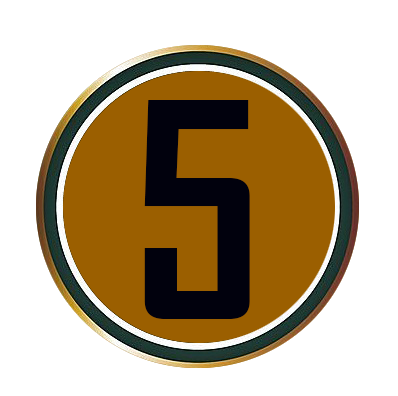
<style>
.page{position:relative;width:398px;height:396px;background:#ffffff}
.page>*{position:absolute;margin:0}
.t1{font:285.7px "AgencyFB-Bold";color:#01010d}
</style>
<div class="page">
<p class="t1" style="left:144px;top:100px;width:106px;height:219px">5</p>
</div>
